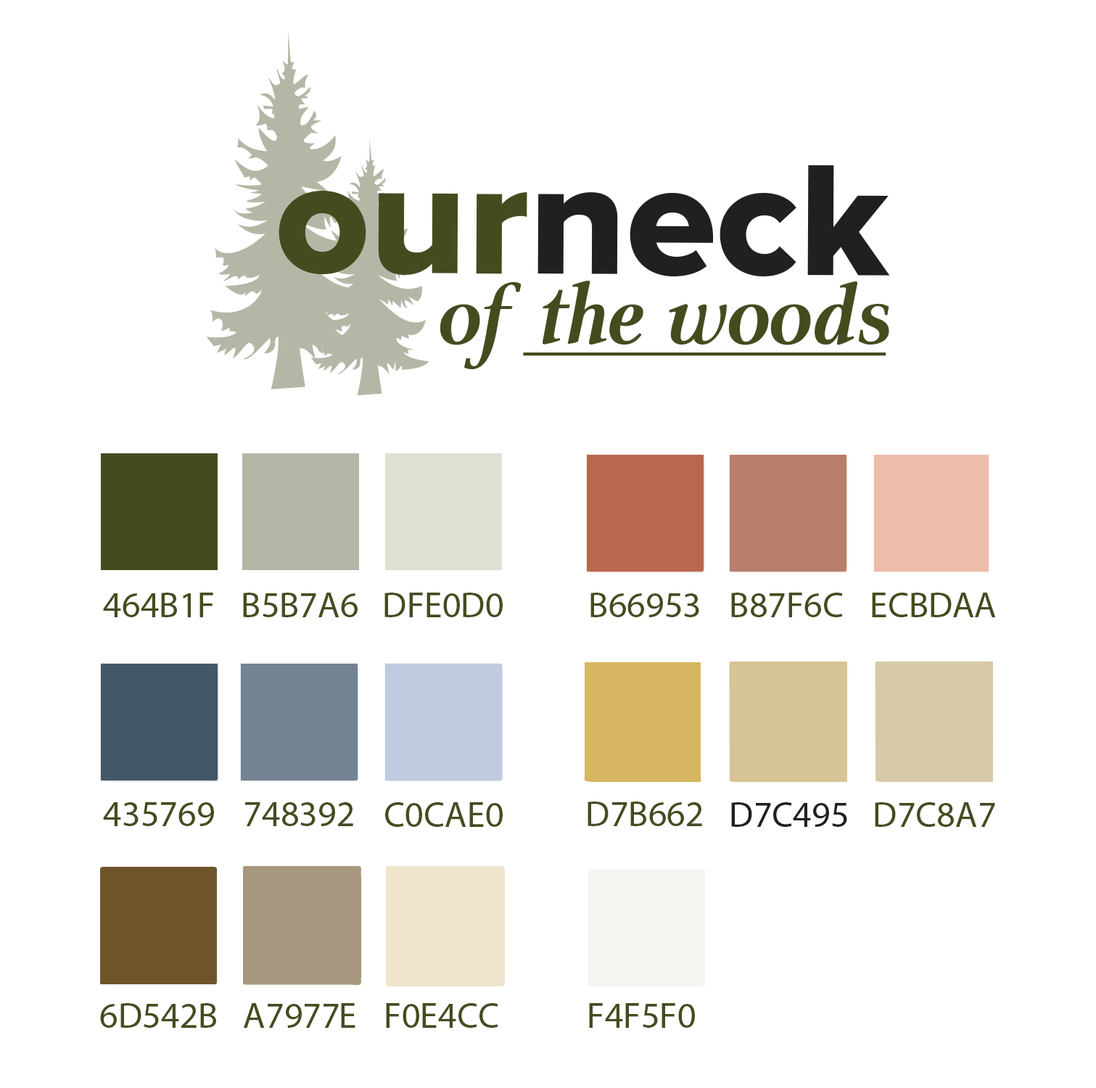
<style>
.page{position:relative;width:1096px;height:1088px;background:#ffffff}
.page>*{position:absolute;margin:0}
.t1{font:36.3px "MyriadPro-Regular";color:#464b1f}
.t2{font:36.3px "MyriadPro-Regular";color:#221f1f}
</style>
<div class="page">
<p class="t1" style="left:103px;top:593px;width:110px;height:24px">464B1F</p>
<p class="t1" style="left:243px;top:593px;width:115px;height:24px">B5B7A6</p>
<p class="t1" style="left:384px;top:593px;width:119px;height:24px">DFE0D0</p>
<p class="t1" style="left:590px;top:593px;width:109px;height:24px">B66953</p>
<p class="t1" style="left:731px;top:593px;width:112px;height:24px">B87F6C</p>
<p class="t1" style="left:872px;top:593px;width:124px;height:24px">ECBDAA</p>
<p class="t1" style="left:103px;top:802px;width:111px;height:24px">435769</p>
<p class="t1" style="left:245px;top:802px;width:108px;height:24px">748392</p>
<p class="t1" style="left:385px;top:802px;width:118px;height:25px">C0CAE0</p>
<p class="t1" style="left:588px;top:801px;width:114px;height:25px">D7B662</p>
<p class="t2" style="left:731px;top:802px;width:116px;height:25px">D7C495</p>
<p class="t1" style="left:875px;top:802px;width:120px;height:25px">D7C8A7</p>
<p class="t1" style="left:100px;top:1003px;width:116px;height:25px">6D542B</p>
<p class="t1" style="left:244px;top:1003px;width:111px;height:25px">A7977E</p>
<p class="t1" style="left:386px;top:1003px;width:112px;height:25px">F0E4CC</p>
<p class="t1" style="left:589px;top:1003px;width:106px;height:25px">F4F5F0</p>
</div>
